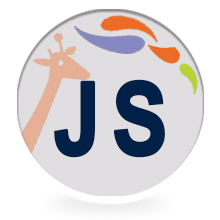
<style>
.page{position:relative;width:220px;height:220px;background:#ffffff}
.page>*{position:absolute;margin:0}
.t1{font:102.4px "ArialNarrow-Bold";letter-spacing:0.08em;color:#002048;font-weight:bold}
</style>
<div class="page">
<p class="t1" style="left:54px;top:79px;width:111px;height:79px">JS</p>
</div>
